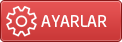
<style>
.page{position:relative;width:122px;height:42px}
.page>*{position:absolute;margin:0}
.t1{font:15.5px "NeoSansTR";color:#ffffff}
</style>
<div class="page">
<p class="t1" style="left:41px;top:15px;width:66px;height:12px">AYARLAR</p>
</div>
